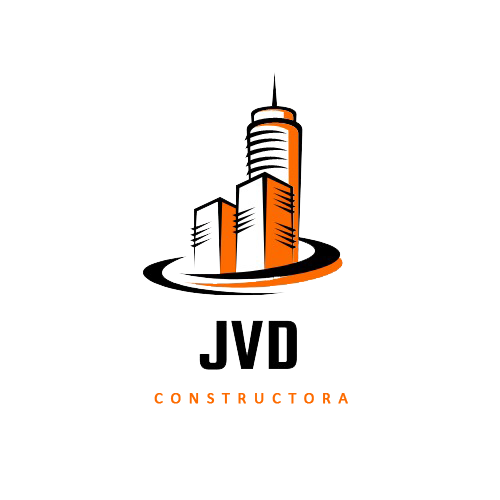
<style>
.page{position:relative;width:500px;height:500px;background:#ffffff}
.page>*{position:absolute;margin:0}
.t1{font:16px "Calibri";letter-spacing:0.46em;color:#fd6b00;font-weight:bold}
</style>
<div class="page">
<p class="t1" style="left:154px;top:393px;width:194px;height:11px">CONSTRUCTORA</p>
</div>
